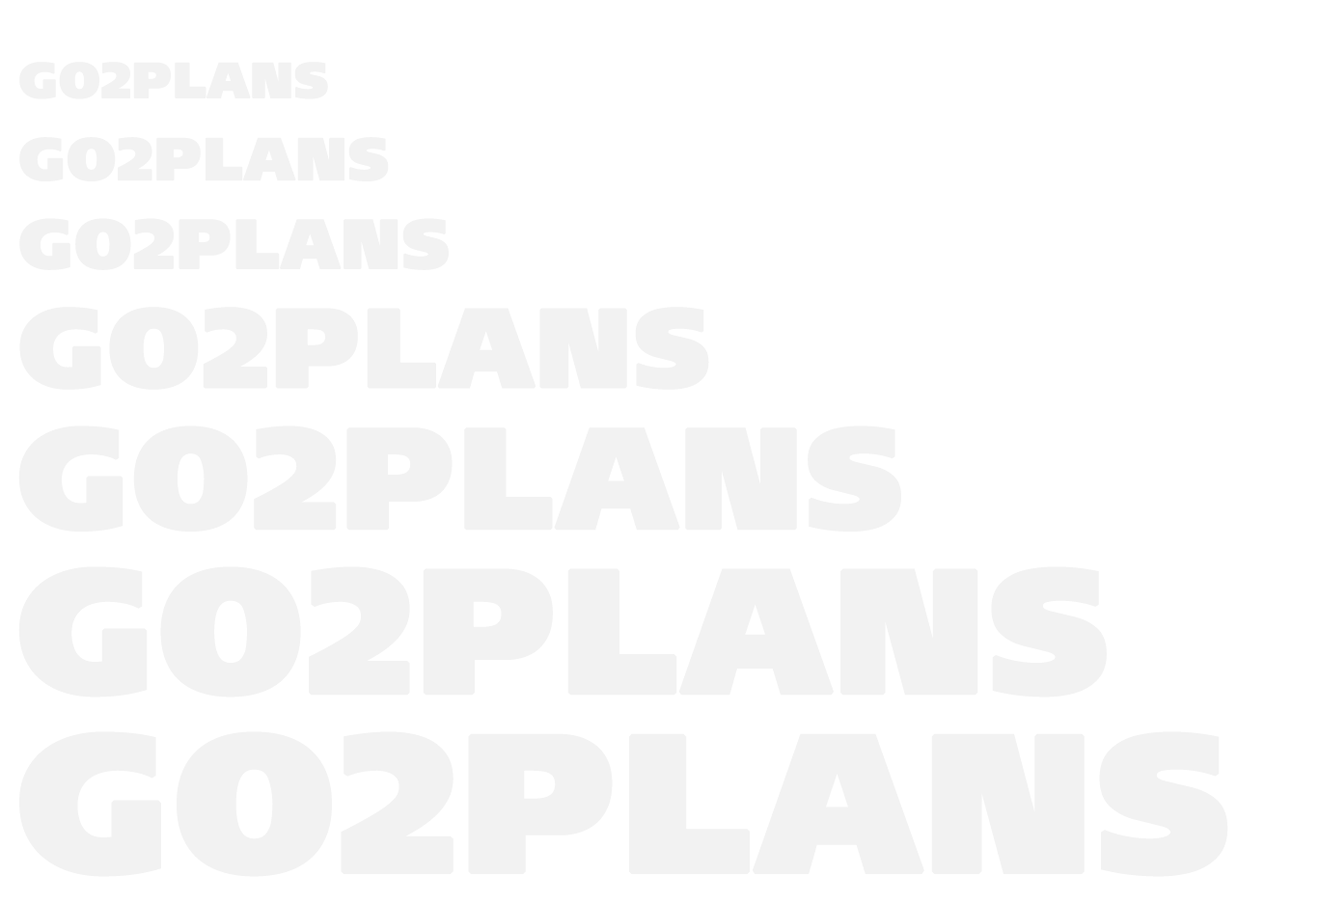
<style>
.page{position:relative;width:1320px;height:903px;background:#ffffff}
.page>*{position:absolute;margin:0}
.t1{font:49.2px "AGForeignerULBPlainMedium";letter-spacing:0.01em;color:#f2f2f2;text-transform:uppercase;font-weight:bold}
.t2{font:58.9px "AGForeignerULBPlainMedium";letter-spacing:0.01em;color:#f2f2f2;text-transform:uppercase;font-weight:bold}
.t3{font:68.5px "AGForeignerULBPlainMedium";letter-spacing:0.01em;color:#f2f2f2;text-transform:uppercase;font-weight:bold}
.t4{font:110px "AGForeignerULBPlainMedium";letter-spacing:0.01em;color:#f2f2f2;text-transform:uppercase;font-weight:bold}
.t5{font:140.9px "AGForeignerULBPlainMedium";letter-spacing:0.01em;color:#f2f2f2;text-transform:uppercase;font-weight:bold}
.t6{font:173.7px "AGForeignerULBPlainMedium";letter-spacing:0.01em;color:#f2f2f2;text-transform:uppercase;font-weight:bold}
.t7{font:193px "AGForeignerULBPlainMedium";letter-spacing:0.01em;color:#f2f2f2;text-transform:uppercase;font-weight:bold}
</style>
<div class="page">
<p class="t1" style="left:19px;top:62px;width:309px;height:37px">GO2PLANS</p>
<p class="t2" style="left:19px;top:137px;width:370px;height:44px">GO2PLANS</p>
<p class="t3" style="left:19px;top:218px;width:430px;height:52px">GO2PLANS</p>
<p class="t4" style="left:19px;top:307px;width:690px;height:83px">GO2PLANS</p>
<p class="t5" style="left:18px;top:426px;width:883px;height:106px">GO2PLANS</p>
<p class="t6" style="left:18px;top:566px;width:1089px;height:132px">GO2PLANS</p>
<p class="t7" style="left:19px;top:731px;width:1209px;height:146px">GO2PLANS</p>
</div>
